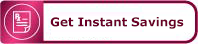
<style>
.page{position:relative;width:198px;height:44px}
.page>*{position:absolute;margin:0}
.t1{font:12px "Verdana-Bold";color:#6a0026}
</style>
<div class="page">
<p class="t1" style="left:50px;top:17px;width:134px;height:12px">Get Instant Savings</p>
</div>
